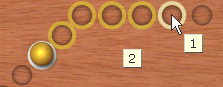
<style>
.page{position:relative;width:223px;height:87px}
.page>*{position:absolute;margin:0}
.t1{font:12px "Verdana";color:#2d2d2d;text-transform:uppercase}
</style>
<div class="page">
<p class="t1" style="left:191px;top:39px;width:5px;height:9px">1</p>
<p class="t1" style="left:129px;top:54px;width:6px;height:9px">2</p>
</div>
